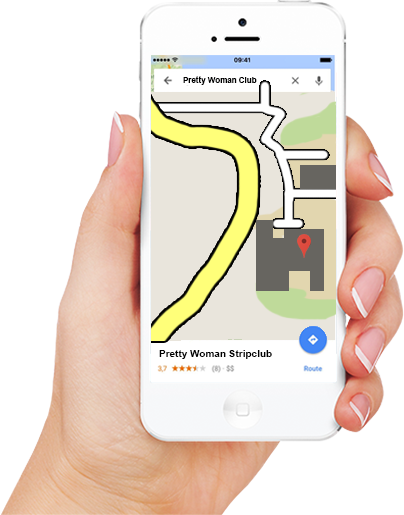
<style>
.page{position:relative;width:404px;height:515px;background:#ffffff}
.page>*{position:absolute;margin:0}
.t1{font:8px "Arial-BoldMT";color:#000000}
.t2{font:10px "Arial-BoldMT";color:#000000}
</style>
<div class="page">
<p class="t1" style="left:183px;top:76px;width:74px;height:9px">Pretty Woman Club</p>
<p class="t2" style="left:159px;top:350px;width:113px;height:9px">Pretty Woman Stripclub</p>
</div>
